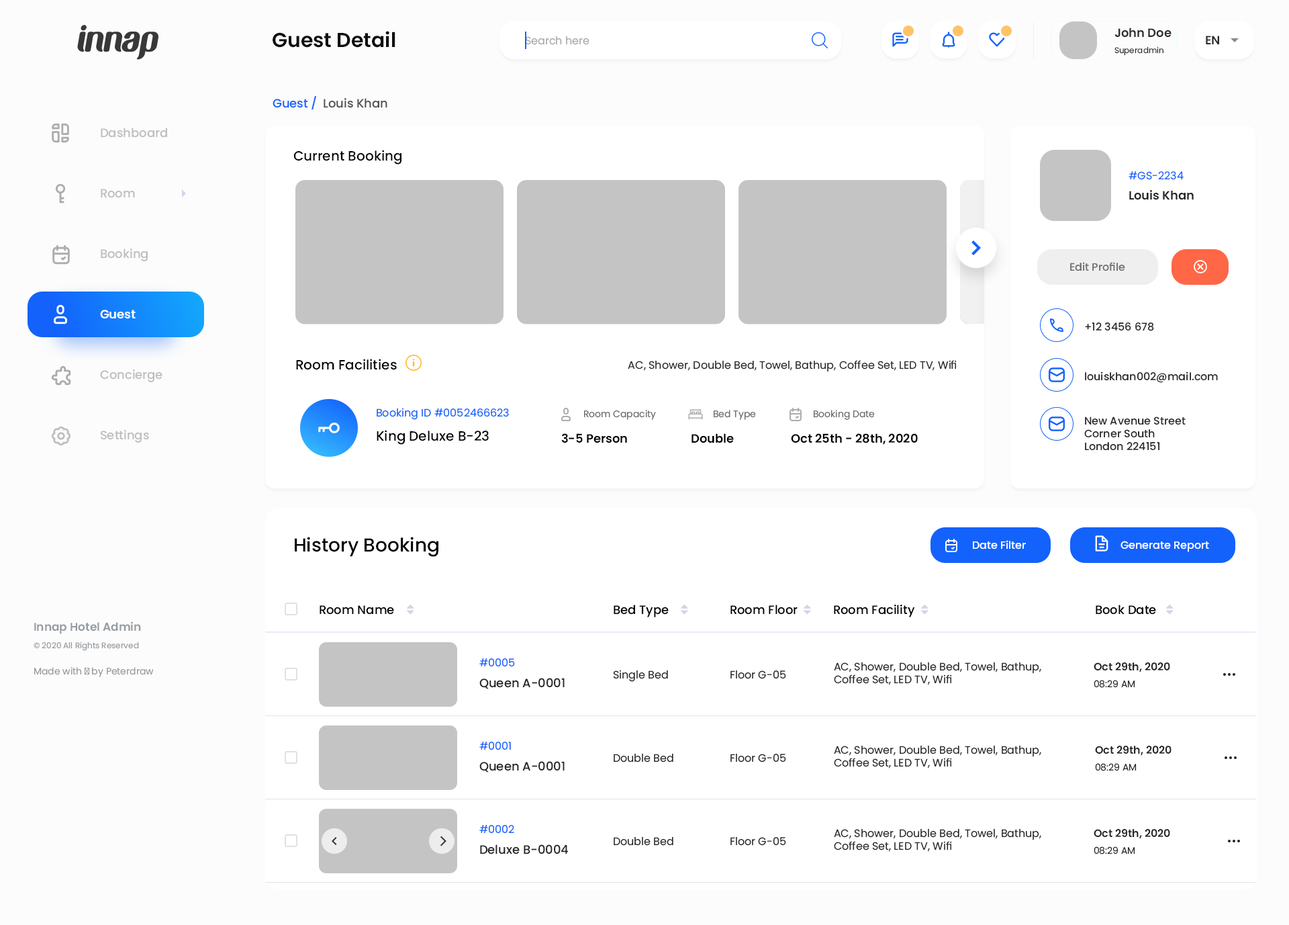
<style>
.page{position:relative;width:1289px;height:925px;background:#ffffff}
.page>*{position:absolute;margin:0}
.t1{font:12.1px "Poppins-SemiBold";color:#2e2e2e}
.t2{font:20.1px "Poppins-SemiBold";color:#0f0f0f}
.t3{font:10.7px "Poppins-Regular";color:#aaaaaa}
.t4{font:8.1px "Poppins-Regular";color:#2e2e2e}
.t5{font:12.1px "Poppins-Medium";color:#1362fc}
.t6{font:12.1px "Poppins-Medium";color:#525252}
.t7{font:12.1px "Poppins-Medium";color:#bfbfbf}
.t8{font:13.4px "Poppins-Medium";color:#000000}
.t9{font:10.7px "Poppins-Regular";color:#1362fc}
.t10{font:12.1px "Poppins-SemiBold";color:#262626}
.t11{font:10.7px "Poppins-Medium";color:#6c6c6c}
.t12{font:12.1px "Poppins-SemiBold";color:#ffffff}
.t13{font:10.7px "Poppins-Medium";color:#262626}
.t14{font:10.7px "Poppins-Regular";color:#262626}
.t15{font:9.4px "Poppins-Regular";color:#686868}
.t16{font:12.1px "Poppins-SemiBold";color:#000000}
.t17{font:18.8px "Poppins-Medium";color:#000000}
.t18{font:10.7px "Poppins-Medium";color:#ffffff}
.t19{font:12.1px "Poppins-Medium";color:#000000}
.t20{font:8.1px/17.5px "Poppins-Regular";color:#969ba0}
.t21{font:11.4px/17.5px "Poppins-SemiBold";color:#969ba0}
.t22{font:10.7px "Poppins-SemiBold";color:#262626}
.t23{font:9.4px "Poppins-Regular";color:#969ba0}
.t24{font:12.1px "Poppins-Medium";color:#262626}
.t25{font:9.4px "Poppins-Regular";color:#262626}
</style>
<div class="page">
<p class="t1" style="left:1115px;top:28px;width:57px;height:10px">John Doe</p>
<p class="t2" style="left:273px;top:31px;width:123px;height:17px">Guest Detail</p>
<p class="t3" style="left:525px;top:36px;width:65px;height:9px">Search here</p>
<p class="t1" style="left:1206px;top:36px;width:14px;height:8px">EN</p>
<p class="t4" style="left:1115px;top:46px;width:49px;height:10px">Superadmin</p>
<p class="t5" style="left:273px;top:95px;width:43px;height:15px">Guest /</p>
<p class="t6" style="left:324px;top:98px;width:64px;height:10px">Louis Khan</p>
<p class="t7" style="left:101px;top:128px;width:66px;height:10px">Dashboard</p>
<p class="t8" style="left:293px;top:150px;width:109px;height:15px">Current Booking</p>
<p class="t9" style="left:1129px;top:171px;width:55px;height:9px">#GS-2234</p>
<p class="t7" style="left:101px;top:189px;width:34px;height:9px">Room</p>
<p class="t10" style="left:1130px;top:190px;width:64px;height:10px">Louis Khan</p>
<p class="t7" style="left:101px;top:248px;width:47px;height:13px">Booking</p>
<p class="t11" style="left:1071px;top:262px;width:55px;height:9px">Edit Profile</p>
<p class="t12" style="left:100px;top:310px;width:36px;height:9px">Guest</p>
<p class="t13" style="left:1085px;top:322px;width:69px;height:9px">+12 3456 678</p>
<p class="t8" style="left:296px;top:359px;width:101px;height:11px">Room Facilities</p>
<p class="t14" style="left:628px;top:360px;width:329px;height:12px">AC, Shower, Double Bed, Towel, Bathup, Coffee Set, LED TV, Wifi</p>
<p class="t7" style="left:100px;top:369px;width:63px;height:13px">Concierge</p>
<p class="t13" style="left:1085px;top:371px;width:133px;height:12px">louiskhan002@mail.com</p>
<p class="t9" style="left:377px;top:408px;width:132px;height:12px">Booking ID #0052466623</p>
<p class="t15" style="left:584px;top:410px;width:72px;height:10px">Room Capacity</p>
<p class="t15" style="left:714px;top:410px;width:42px;height:10px">Bed Type</p>
<p class="t15" style="left:814px;top:410px;width:61px;height:10px">Booking Date</p>
<p class="t13" style="left:1085px;top:416px;width:101px;height:35px">New Avenue Street<br>Corner South<br>London 224151</p>
<p class="t7" style="left:101px;top:430px;width:48px;height:13px">Settings</p>
<p class="t8" style="left:377px;top:430px;width:112px;height:15px">King Deluxe B-23</p>
<p class="t16" style="left:561px;top:433px;width:66px;height:10px">3-5 Person</p>
<p class="t16" style="left:692px;top:433px;width:42px;height:10px">Double</p>
<p class="t16" style="left:791px;top:433px;width:127px;height:12px">Oct 25th - 28th, 2020</p>
<p class="t17" style="left:295px;top:537px;width:144px;height:20px">History Booking</p>
<p class="t18" style="left:973px;top:540px;width:53px;height:9px">Date Filter</p>
<p class="t18" style="left:1121px;top:541px;width:89px;height:11px">Generate Report</p>
<p class="t19" style="left:320px;top:605px;width:74px;height:9px">Room Name</p>
<p class="t19" style="left:614px;top:604px;width:55px;height:13px">Bed Type</p>
<p class="t19" style="left:731px;top:604px;width:67px;height:10px">Room Floor</p>
<p class="t19" style="left:834px;top:604px;width:81px;height:13px">Room Facility</p>
<p class="t19" style="left:1096px;top:604px;width:60px;height:10px">Book Date</p>
<p class="t20" style="left:34px;top:621px;width:107px;height:30px"><span class="t21">Innap Hotel Admin<br></span>© 2020 All Rights Reserved</p>
<p class="t9" style="left:480px;top:658px;width:35px;height:9px">#0005</p>
<p class="t14" style="left:834px;top:662px;width:208px;height:23px">AC, Shower, Double Bed, Towel, Bathup, Coffee Set, LED TV, Wifi</p>
<p class="t22" style="left:1094px;top:662px;width:77px;height:10px">Oct 29th, 2020</p>
<p class="t23" style="left:34px;top:667px;width:120px;height:10px">Made with ♥ by Peterdraw</p>
<p class="t24" style="left:480px;top:678px;width:85px;height:11px">Queen A-0001</p>
<p class="t14" style="left:613px;top:670px;width:55px;height:12px">Single Bed</p>
<p class="t14" style="left:731px;top:670px;width:55px;height:9px">Floor G-05</p>
<p class="t25" style="left:1094px;top:680px;width:42px;height:8px">08:29 AM</p>
<p class="t9" style="left:480px;top:741px;width:31px;height:9px">#0001</p>
<p class="t14" style="left:834px;top:745px;width:208px;height:23px">AC, Shower, Double Bed, Towel, Bathup, Coffee Set, LED TV, Wifi</p>
<p class="t22" style="left:1095px;top:745px;width:77px;height:11px">Oct 29th, 2020</p>
<p class="t24" style="left:480px;top:761px;width:85px;height:11px">Queen A-0001</p>
<p class="t14" style="left:614px;top:754px;width:60px;height:8px">Double Bed</p>
<p class="t14" style="left:731px;top:754px;width:55px;height:8px">Floor G-05</p>
<p class="t25" style="left:1095px;top:763px;width:42px;height:8px">08:29 AM</p>
<p class="t9" style="left:480px;top:825px;width:34px;height:8px">#0002</p>
<p class="t14" style="left:834px;top:829px;width:208px;height:23px">AC, Shower, Double Bed, Towel, Bathup, Coffee Set, LED TV, Wifi</p>
<p class="t22" style="left:1094px;top:829px;width:77px;height:10px">Oct 29th, 2020</p>
<p class="t24" style="left:480px;top:844px;width:89px;height:10px">Deluxe B-0004</p>
<p class="t14" style="left:614px;top:837px;width:60px;height:9px">Double Bed</p>
<p class="t14" style="left:731px;top:837px;width:55px;height:9px">Floor G-05</p>
<p class="t25" style="left:1094px;top:846px;width:42px;height:8px">08:29 AM</p>
</div>
